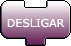
<style>
.page{position:relative;width:71px;height:46px;background:#ffffff}
.page>*{position:absolute;margin:0}
.t1{font:11px "Verdana";color:#ffffff}
</style>
<div class="page">
<p class="t1" style="left:7px;top:18px;width:58px;height:10px">DESLIGAR</p>
</div>
